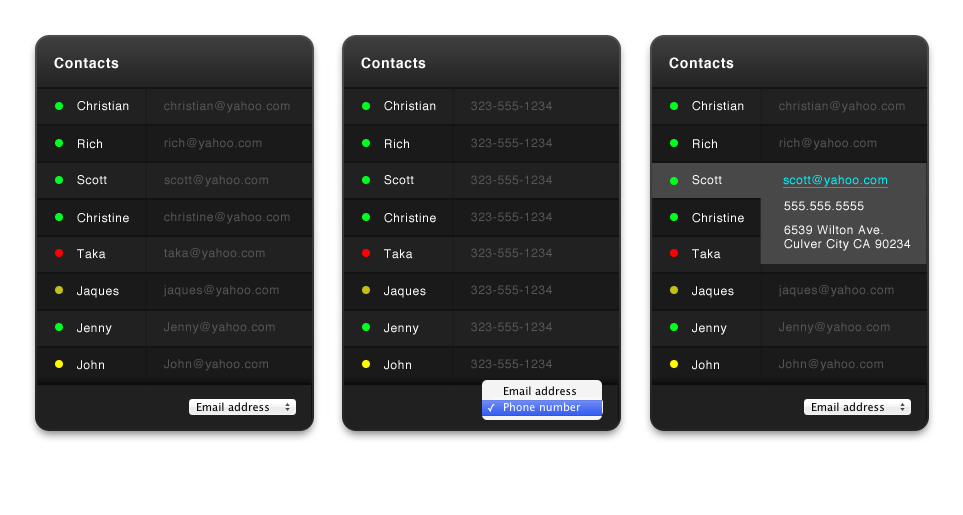
<style>
.page{position:relative;width:963px;height:515px;background:#ffffff}
.page>*{position:absolute;margin:0}
.t1{font:14px "Helvetica-Bold";letter-spacing:0.05em;color:#ffffff}
.t2{font:12px "Helvetica";letter-spacing:0.05em;color:#ffffff}
.t3{font:12px "Helvetica";letter-spacing:0.05em;color:#565656}
.t4{font:12px "Helvetica";letter-spacing:0.05em;color:#00f6ff;text-decoration:underline}
</style>
<div class="page">
<p class="t1" style="left:54px;top:57px;width:65px;height:12px">Contacts</p>
<p class="t1" style="left:361px;top:57px;width:65px;height:12px">Contacts</p>
<p class="t1" style="left:669px;top:57px;width:65px;height:12px">Contacts</p>
<p class="t2" style="left:77px;top:101px;width:52px;height:10px">Christian</p>
<p class="t3" style="left:164px;top:101px;width:126px;height:12px">christian@yahoo.com</p>
<p class="t2" style="left:384px;top:101px;width:52px;height:10px">Christian</p>
<p class="t3" style="left:471px;top:101px;width:81px;height:10px">323-555-1234</p>
<p class="t2" style="left:692px;top:101px;width:52px;height:10px">Christian</p>
<p class="t3" style="left:779px;top:101px;width:126px;height:12px">christian@yahoo.com</p>
<p class="t2" style="left:78px;top:139px;width:24px;height:10px">Rich</p>
<p class="t3" style="left:164px;top:138px;width:98px;height:12px">rich@yahoo.com</p>
<p class="t2" style="left:385px;top:139px;width:24px;height:10px">Rich</p>
<p class="t3" style="left:471px;top:138px;width:81px;height:10px">323-555-1234</p>
<p class="t2" style="left:693px;top:139px;width:24px;height:10px">Rich</p>
<p class="t3" style="left:779px;top:138px;width:98px;height:12px">rich@yahoo.com</p>
<p class="t2" style="left:77px;top:175px;width:30px;height:10px">Scott</p>
<p class="t3" style="left:164px;top:175px;width:104px;height:12px">scott@yahoo.com</p>
<p class="t2" style="left:384px;top:175px;width:30px;height:10px">Scott</p>
<p class="t3" style="left:471px;top:175px;width:81px;height:10px">323-555-1234</p>
<p class="t2" style="left:692px;top:175px;width:30px;height:10px">Scott</p>
<p class="t2" style="left:692px;top:175px;width:30px;height:10px">Scott</p>
<p class="t4" style="left:783px;top:175px;width:106px;height:13px">scott@yahoo.com</p>
<p class="t2" style="left:784px;top:201px;width:80px;height:10px">555.555.5555</p>
<p class="t2" style="left:77px;top:213px;width:52px;height:10px">Christine</p>
<p class="t3" style="left:164px;top:212px;width:126px;height:12px">christine@yahoo.com</p>
<p class="t2" style="left:384px;top:213px;width:52px;height:10px">Christine</p>
<p class="t3" style="left:471px;top:212px;width:81px;height:10px">323-555-1234</p>
<p class="t2" style="left:692px;top:213px;width:52px;height:10px">Christine</p>
<p class="t2" style="left:784px;top:225px;width:127px;height:26px">6539 Wilton Ave.<br>Culver City CA 90234</p>
<p class="t2" style="left:77px;top:249px;width:29px;height:10px">Taka</p>
<p class="t3" style="left:164px;top:248px;width:101px;height:12px">taka@yahoo.com</p>
<p class="t2" style="left:384px;top:249px;width:29px;height:10px">Taka</p>
<p class="t3" style="left:471px;top:248px;width:81px;height:10px">323-555-1234</p>
<p class="t2" style="left:692px;top:249px;width:29px;height:10px">Taka</p>
<p class="t2" style="left:77px;top:286px;width:42px;height:12px">Jaques</p>
<p class="t3" style="left:163px;top:285px;width:116px;height:12px">jaques@yahoo.com</p>
<p class="t2" style="left:384px;top:286px;width:42px;height:12px">Jaques</p>
<p class="t3" style="left:471px;top:285px;width:81px;height:10px">323-555-1234</p>
<p class="t2" style="left:692px;top:286px;width:42px;height:12px">Jaques</p>
<p class="t3" style="left:778px;top:285px;width:116px;height:12px">jaques@yahoo.com</p>
<p class="t2" style="left:77px;top:323px;width:35px;height:12px">Jenny</p>
<p class="t3" style="left:164px;top:322px;width:111px;height:12px">Jenny@yahoo.com</p>
<p class="t2" style="left:384px;top:323px;width:35px;height:12px">Jenny</p>
<p class="t3" style="left:471px;top:322px;width:81px;height:10px">323-555-1234</p>
<p class="t2" style="left:692px;top:323px;width:35px;height:12px">Jenny</p>
<p class="t3" style="left:779px;top:322px;width:111px;height:12px">Jenny@yahoo.com</p>
<p class="t2" style="left:77px;top:360px;width:27px;height:10px">John</p>
<p class="t3" style="left:164px;top:359px;width:104px;height:12px">John@yahoo.com</p>
<p class="t2" style="left:384px;top:360px;width:27px;height:10px">John</p>
<p class="t3" style="left:471px;top:359px;width:81px;height:10px">323-555-1234</p>
<p class="t2" style="left:692px;top:360px;width:27px;height:10px">John</p>
<p class="t3" style="left:779px;top:359px;width:104px;height:12px">John@yahoo.com</p>
</div>
